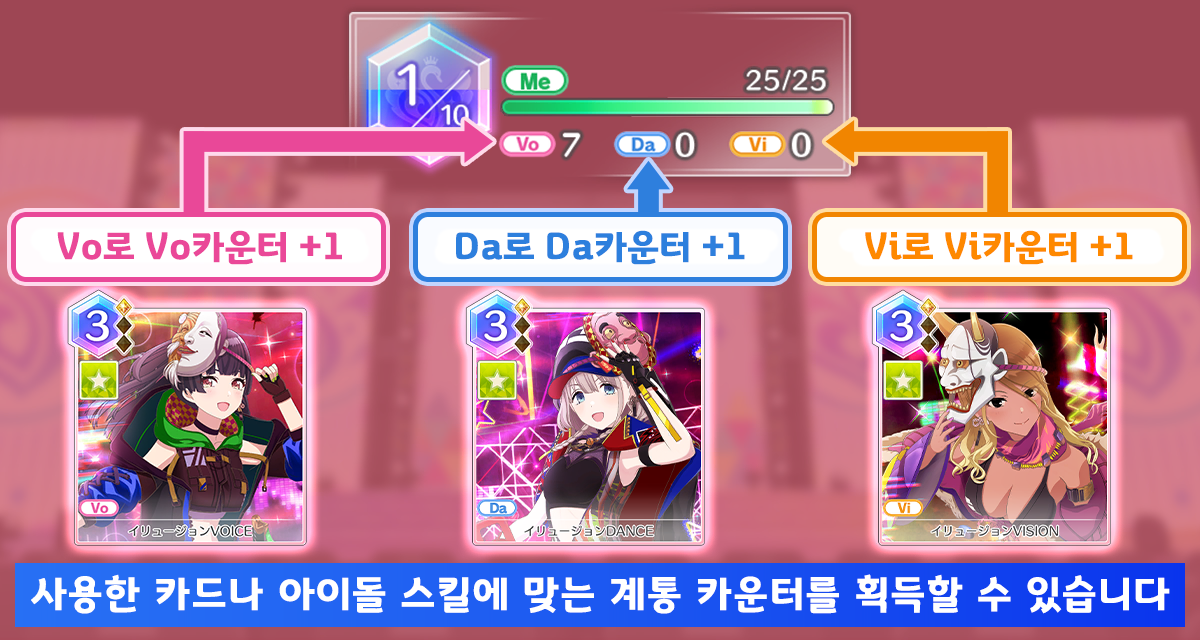
<style>
.page{position:relative;width:1200px;height:640px}
.page>*{position:absolute;margin:0}
.t1{font:37.3px "GyeonggiTitleB";color:#ea4898}
.t2{font:37.3px "GyeonggiTitleB";color:#2d7fdd}
.t3{font:37.3px "GyeonggiTitleB";color:#fe8800}
.t4{font:40px "GyeonggiTitleB";letter-spacing:0.05em;color:#ffffff}
</style>
<div class="page">
<p class="t1" style="left:57px;top:230px;width:285px;height:35px">Vo로 Vo카운터 +1</p>
<p class="t2" style="left:456px;top:230px;width:289px;height:35px">Da로 Da카운터 +1</p>
<p class="t3" style="left:865px;top:230px;width:268px;height:35px">Vi로 Vi카운터 +1</p>
<p class="t4" style="left:31px;top:574px;width:1139px;height:40px">사용한 카드나 아이돌 스킬에 맞는 계통 카운터를 획득할 수 있습니다</p>
</div>
